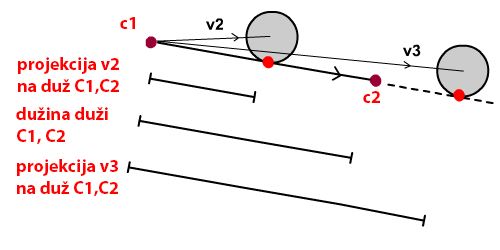
<style>
.page{position:relative;width:500px;height:250px;background:#ffffff}
.page>*{position:absolute;margin:0}
.t1{font:18px "MyriadPro-Bold";color:#ff0000}
</style>
<div class="page">
<p class="t1" style="left:120px;top:17px;width:15px;height:12px">c1</p>
<p class="t1" style="left:18px;top:57px;width:101px;height:37px">projekcija v2<br>na duž C1,C2</p>
<p class="t1" style="left:363px;top:91px;width:17px;height:12px">c2</p>
<p class="t1" style="left:16px;top:107px;width:92px;height:37px">dužina duži<br>C1, C2</p>
<p class="t1" style="left:17px;top:159px;width:101px;height:37px">projekcija v3<br>na duž C1,C2</p>
</div>
